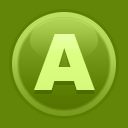
<style>
.page{position:relative;width:128px;height:128px;background:#638608}
.page>*{position:absolute;margin:0}
.t1{font:78px "Arial-Black";color:#d9fc7e}
</style>
<div class="page">
<p class="t1" style="left:34px;top:34px;width:61px;height:56px">A</p>
</div>
